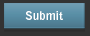
<style>
.page{position:relative;width:90px;height:36px;background:#333333}
.page>*{position:absolute;margin:0}
.t1{font:12px "BellGothicStd-Bold";color:#ffffff;scale:1.05 1}
</style>
<div class="page">
<p class="t1" style="left:25px;top:11px;width:38px;height:9px">Submit</p>
</div>
